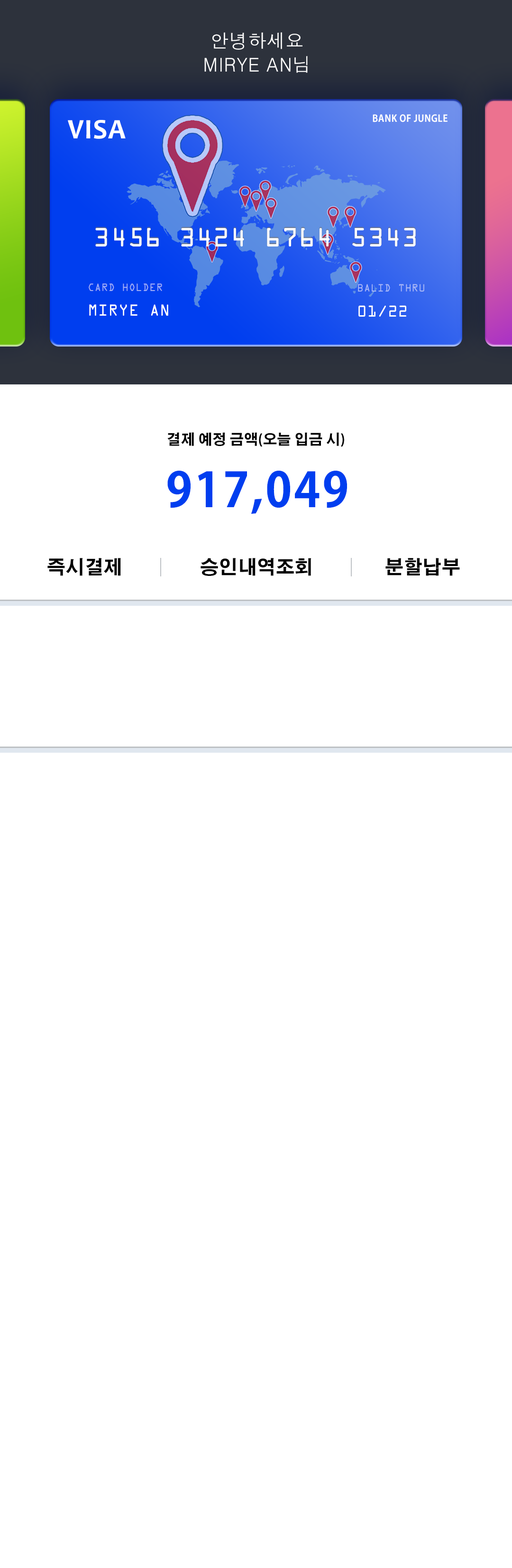
<style>
.page{position:relative;width:512px;height:1568px;background:#ffffff}
.page>*{position:absolute;margin:0}
.t1{font:19px/23.7px "Dotum";letter-spacing:0.025em;color:#ffffff}
.t2{font:28.4px "Candara-Bold";letter-spacing:0.025em;color:#ffffff}
.t3{font:9.5px "AdobeGothicStd-Bold";letter-spacing:0.025em;color:#ffffff}
.t4{font:23.7px "OCRAStd";letter-spacing:0.025em;color:#fefefe}
.t5{font:9.5px "OCRAStd";letter-spacing:0.025em;color:#a3b0f7;scale:0.97 1}
.t6{font:9.5px "OCRAStd";letter-spacing:0.025em;color:#adbbf7}
.t7{font:14.3px "OCRAStd";letter-spacing:0.025em;color:#ffffff;scale:0.97 1}
.t8{font:14.2px "OCRAStd";letter-spacing:0.025em;color:#ffffff}
.t9{font:14.3px "AdobeGothicStd-Bold";letter-spacing:0.025em;color:#000000;scale:0.97 1}
.t10{font:47.5px "AdobeGothicStd-Bold";letter-spacing:0.045em;color:#003eef;scale:0.97 1}
.t11{font:18.8px "AdobeGothicStd-Bold";letter-spacing:0.025em;color:#000000}
</style>
<div class="page">
<p class="t1" style="left:204px;top:32px;width:104px;height:41px;text-align:center">안녕하세요<br>MIRYE AN님</p>
<p class="t2" style="left:68px;top:120px;width:58px;height:19px">VISA</p>
<p class="t3" style="left:373px;top:114px;width:74px;height:8px">BANK OF JUNGLE</p>
<p class="t4" style="left:95px;top:228px;width:321px;height:18px">3456 3424 6764 5343</p>
<p class="t5" style="left:89px;top:283px;width:73px;height:8px">CARD HOLDER</p>
<p class="t6" style="left:358px;top:284px;width:66px;height:8px">BALID THRU</p>
<p class="t7" style="left:89px;top:304px;width:79px;height:12px">MIRYE AN</p>
<p class="t8" style="left:358px;top:305px;width:48px;height:12px">01/22</p>
<p class="t9" style="left:167px;top:432px;width:177px;height:15px">결제 예정 금액(오늘 입금 시)</p>
<p class="t10" style="left:167px;top:471px;width:180px;height:43px">917,049</p>
<p class="t11" style="left:47px;top:558px;width:74px;height:18px">즉시결제</p>
<p class="t11" style="left:201px;top:558px;width:110px;height:18px">승인내역조회</p>
<p class="t11" style="left:385px;top:558px;width:75px;height:18px">분할납부</p>
</div>
